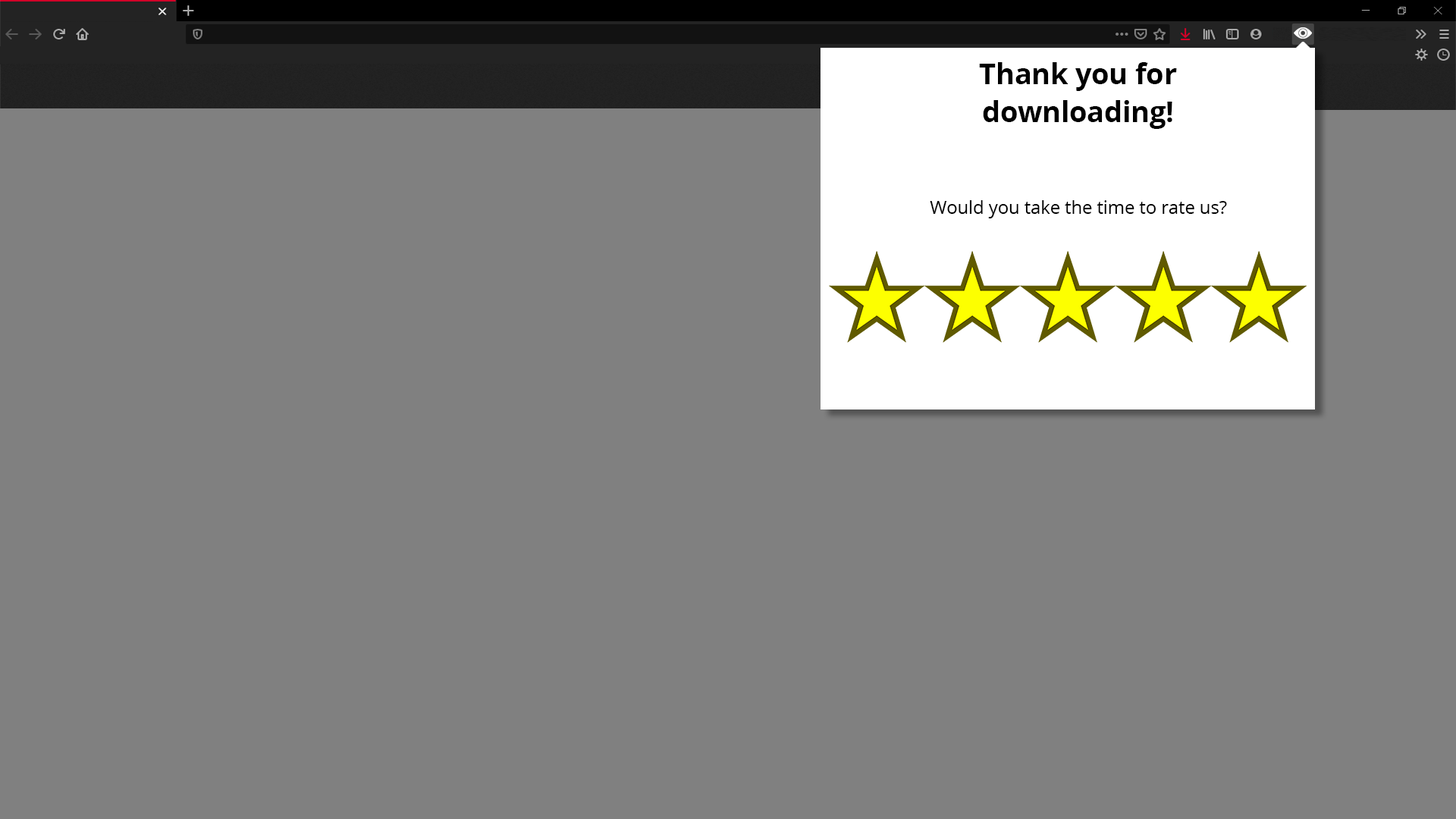
<style>
.page{position:relative;width:1456px;height:819px;background:#808080}
.page>*{position:absolute;margin:0}
.t1{font:28.4px/37.9px "OpenSans-Bold";color:#000000}
.t2{font:18px "OpenSans-Regular";color:#000000}
</style>
<div class="page">
<p class="t1" style="left:979px;top:62px;width:198px;height:67px;text-align:center">Thank you for<br>downloading!</p>
<p class="t2" style="left:930px;top:200px;width:297px;height:18px">Would you take the time to rate us?</p>
</div>
